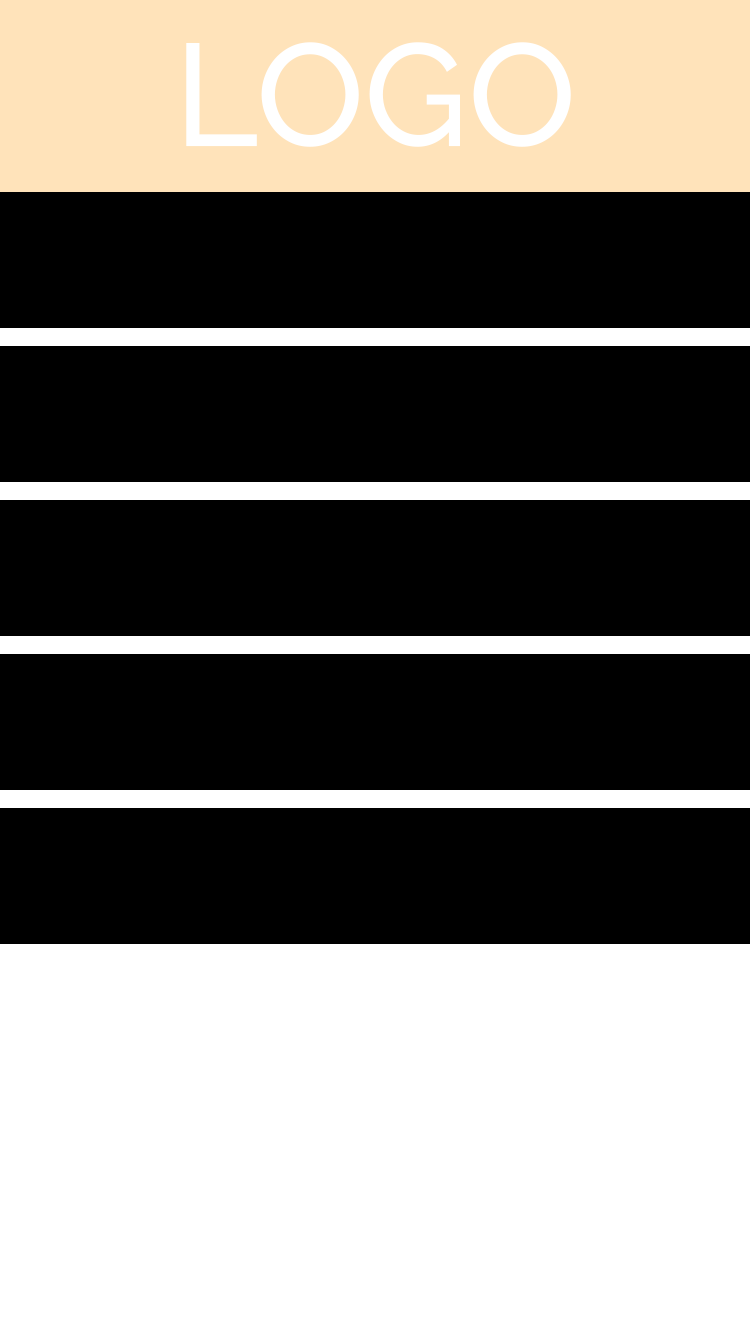
<style>
.page{position:relative;width:750px;height:1334px;background:#000000}
.page>*{position:absolute;margin:0}
.t1{font:145px "Raleway-Medium";color:#ffffff}
</style>
<div class="page">
<p class="t1" style="left:186px;top:42px;width:385px;height:105px">LOGO</p>
</div>
